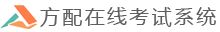
<style>
.page{position:relative;width:220px;height:32px;background:#ffffff}
.page>*{position:absolute;margin:0}
.t1{font:20.3px "MicrosoftYaHei";letter-spacing:0.1em;color:#5e5e61}
</style>
<div class="page">
<p class="t1" style="left:40px;top:7px;width:176px;height:20px">方配在线考试系统</p>
</div>
